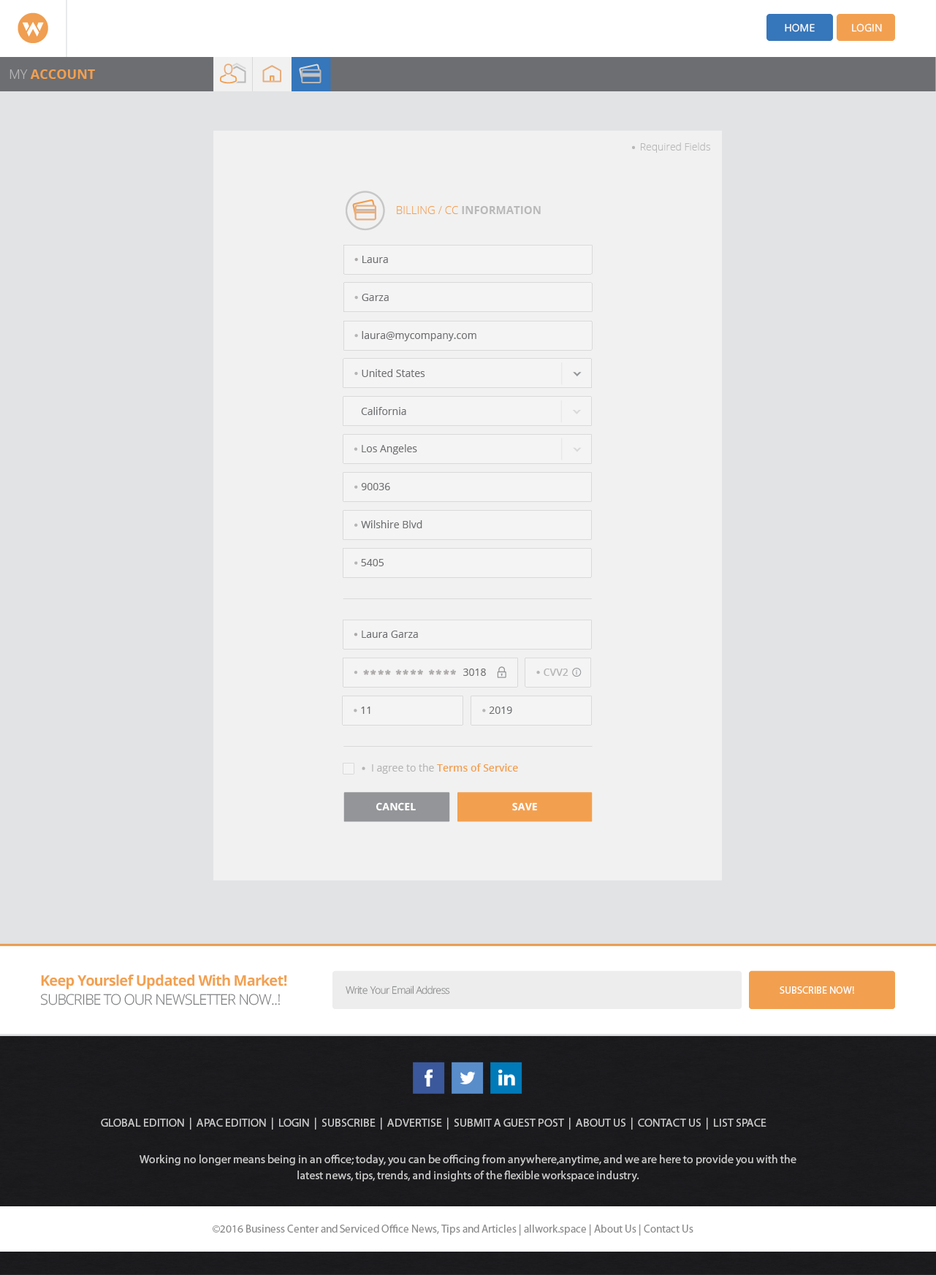
<style>
.page{position:relative;width:936px;height:1275px;background:#e1e3e4}
.page>*{position:absolute;margin:0}
.t1{font:10.2px "OpenSans";color:#fefefe;text-transform:uppercase}
.t2{font:13.1px "OpenSans-Bold";color:#f2a04f}
.t3{font:13.1px "OpenSans-Light";color:#b6b6b7}
.t4{font:10.2px "OpenSans-Light";color:#b8b8b8}
.t5{font:11px "OpenSans-Light";color:#f2a04f}
.t6{font:11px "OpenSans-Bold";color:#b8b8b8}
.t7{font:10.2px "OpenSans";color:#6d6e71}
.t8{font:10.2px "OpenSans-Semibold";color:#b5b5b5}
.t9{font:10.2px "OpenSans-Semibold";color:#f2a04f}
.t10{font:10.2px "OpenSans";color:#b5b5b5}
.t11{font:10.2px "OpenSans-Bold";color:#fefefe;text-transform:uppercase}
.t12{font:14.6px/19px "OpenSans-Bold";letter-spacing:-0.04em;color:#f2a04f}
.t13{font:14.6px/19px "OpenSans-Light";letter-spacing:-0.04em;color:#78797b;text-transform:uppercase}
.t14{font:10.2px "OpenSans-Light";letter-spacing:-0.04em}
.t15{font:10.2px "MyriadPro-Regular";color:#fefefe;text-transform:uppercase}
.t16{font:11.7px "MyriadPro-Regular";color:#c7c7c7;text-transform:uppercase}
.t17{font:11.7px/16.1px "MyriadPro-Regular";color:#c7c7c7}
.t18{font:11px "MyriadPro-Regular";color:#8d8d8d}
</style>
<div class="page">
<p class="t1" style="left:784px;top:23px;width:30px;height:9px">HOME</p>
<p class="t1" style="left:852px;top:23px;width:30px;height:9px">Login</p>
<p class="t2" style="left:9px;top:69px;width:86px;height:10px"><span class="t3">MY </span>ACCOUNT</p>
<p class="t4" style="left:641px;top:142px;width:69px;height:11px">Required Fields</p>
<p class="t5" style="left:397px;top:206px;width:143px;height:8px">BILLING / CC <span class="t6">INFORMATION</span></p>
<p class="t7" style="left:362px;top:256px;width:26px;height:7px">Laura</p>
<p class="t7" style="left:362px;top:294px;width:27px;height:7px">Garza</p>
<p class="t7" style="left:362px;top:331px;width:114px;height:10px">laura@mycompany.com</p>
<p class="t7" style="left:362px;top:369px;width:63px;height:8px">United States</p>
<p class="t7" style="left:361px;top:407px;width:45px;height:8px">California</p>
<p class="t7" style="left:362px;top:444px;width:55px;height:10px">Los Angeles</p>
<p class="t7" style="left:361px;top:483px;width:29px;height:7px">90036</p>
<p class="t7" style="left:361px;top:520px;width:61px;height:8px">Wilshire Blvd</p>
<p class="t7" style="left:361px;top:559px;width:23px;height:7px">5405</p>
<p class="t7" style="left:362px;top:630px;width:56px;height:8px">Laura Garza</p>
<p class="t7" style="left:463px;top:668px;width:23px;height:8px">3018</p>
<p class="t8" style="left:543px;top:668px;width:25px;height:8px">CVV2</p>
<p class="t7" style="left:361px;top:706px;width:9px;height:8px">11</p>
<p class="t7" style="left:489px;top:706px;width:23px;height:8px">2019</p>
<p class="t9" style="left:372px;top:763px;width:146px;height:10px"><span class="t10">I agree to the </span>Terms of Service</p>
<p class="t11" style="left:375px;top:802px;width:41px;height:9px">CANCEL</p>
<p class="t11" style="left:512px;top:802px;width:25px;height:9px">SAVE</p>
<p class="t12" style="left:40px;top:974px;width:247px;height:31px">Keep Yourslef Updated With Market!<br><span class="t13">Subcribe to Our Newsletter Now..!</span></p>
<p class="t14" style="left:345px;top:985px;width:105px;height:9px">Write Your Email Address</p>
<p class="t15" style="left:779px;top:986px;width:75px;height:7px">Subscribe Now!</p>
<p class="t16" style="left:101px;top:1117px;width:665px;height:12px">Global Edition  |  APAC Edition  |  Login  |  Subscribe  |  Advertise  |  Submit a guest post  |  About us  |  Contact us  |  List Space</p>
<p class="t17" style="left:140px;top:1154px;width:656px;height:28px;text-align:center">Working no longer means being in an office; today, you can be officing from anywhere,anytime, and we are here to provide you with the latest news, tips, trends, and insights of the flexible workspace industry.</p>
<p class="t18" style="left:213px;top:1223px;width:480px;height:12px">©2016 Business Center and Serviced Office News, Tips and Articles | allwork.space | About Us | Contact Us</p>
</div>
